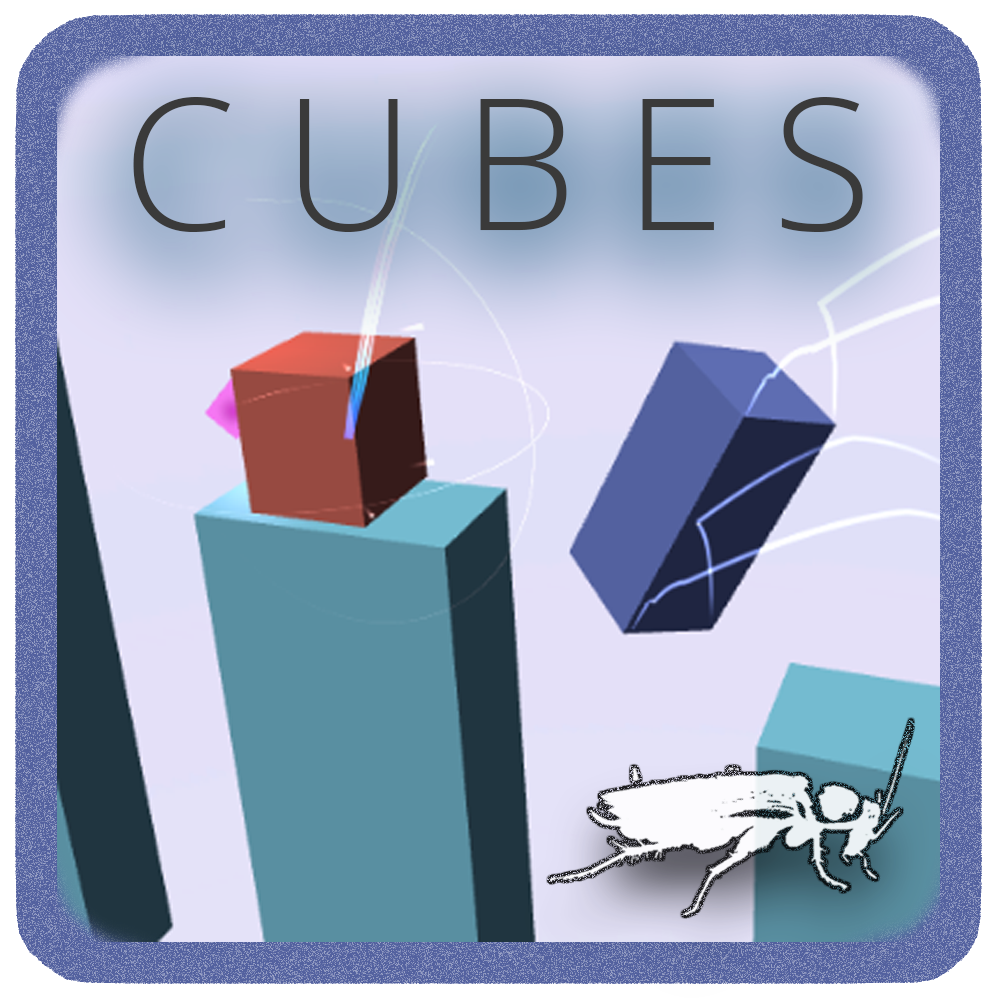
<style>
.page{position:relative;width:1000px;height:1000px}
.page>*{position:absolute;margin:0}
.t1{font:182.6px "OpenSans-Light";color:#3a3a3a}
</style>
<div class="page">
<p class="t1" style="left:133px;top:97px;width:730px;height:135px">C U B E S</p>
</div>
